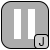
<style>
.page{position:relative;width:50px;height:50px;background:#acacac}
.page>*{position:absolute;margin:0}
.t1{font:12px "ArialMT";color:#000000}
</style>
<div class="page">
<p class="t1" style="left:38px;top:37px;width:6px;height:9px">J</p>
</div>
